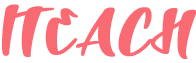
<style>
.page{position:relative;width:196px;height:63px;background:#ffffff}
.page>*{position:absolute;margin:0}
.t1{font:74.6px "TheLaughingWolf.-Regular";color:#fa6a73;text-transform:uppercase;font-weight:bold}
</style>
<div class="page">
<p class="t1" style="left:2px;top:4px;width:195px;height:55px">Iteach</p>
</div>
